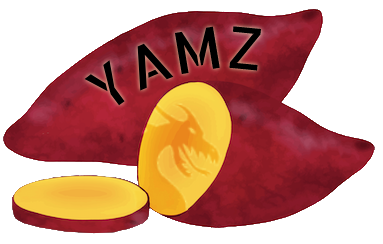
<style>
.page{position:relative;width:383px;height:244px;background:#ffffff}
.page>*{position:absolute;margin:0}
.t1{font:57.9px "AllertaStencil-Regular";color:#000000}
</style>
<div class="page">
<p class="t1" style="left:84px;top:26px;width:178px;height:80px;rotate:-16deg">YAMZ</p>
</div>
